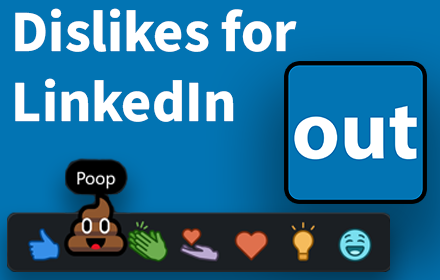
<style>
.page{position:relative;width:440px;height:280px;background:#0274b3}
.page>*{position:absolute;margin:0}
.t1{font:58.3px "SourceSans3Roman-Bold";color:#ffffff}
</style>
<div class="page">
<p class="t1" style="left:15px;top:8px;width:282px;height:114px">Dislikes for LinkedIn</p>
</div>
